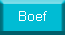
<style>
.page{position:relative;width:65px;height:35px;background:#00bcd4}
.page>*{position:absolute;margin:0}
.t1{font:14px "MicrosoftSansSerif";color:#ffffff}
</style>
<div class="page">
<p class="t1" style="left:19px;top:11px;width:28px;height:10px">Boef</p>
</div>
